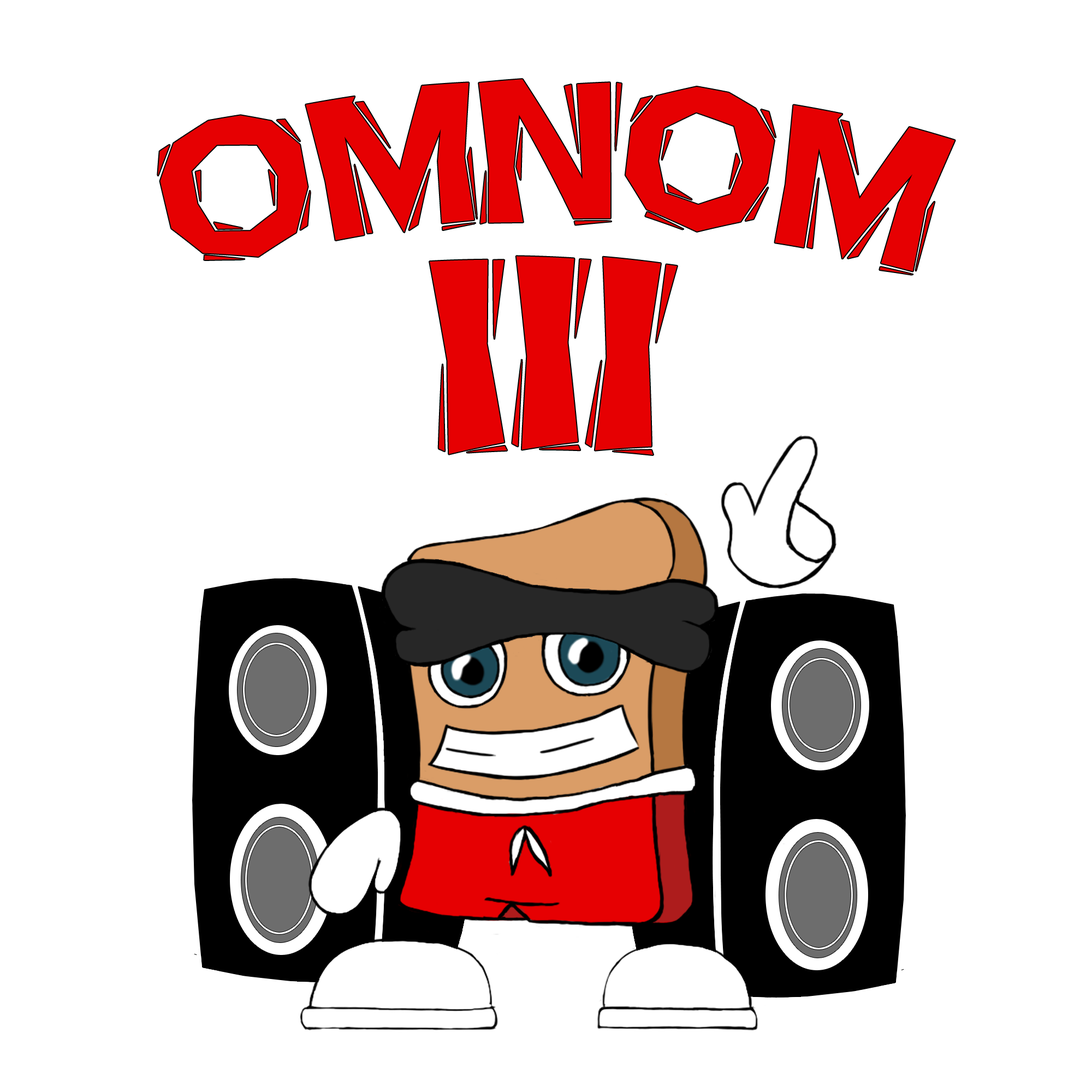
<style>
.page{position:relative;width:1092px;height:1092px;background:#ffffff}
.page>*{position:absolute;margin:0}
.t1{font:242.2px/172.9px "BlueHighwayLinocut";letter-spacing:-0.03em;color:#e60002;scale:0.83 1}
.t2{font:343.5px/229.8px "BlueHighwayLinocut";letter-spacing:-0.02em;color:#e60002}
</style>
<div class="page">
<p class="t1" style="left:158px;top:79px;width:797px;height:376px;text-align:center">OMNOM<br><span class="t2">III</span></p>
</div>
